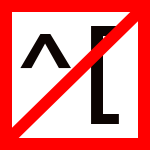
<style>
.page{position:relative;width:150px;height:150px;background:#ffffff}
.page>*{position:absolute;margin:0}
.t1{font:108px "Consolas-Bold";color:#0c0402}
</style>
<div class="page">
<p class="t1" style="left:20px;top:26px;width:99px;height:98px">^[</p>
</div>
